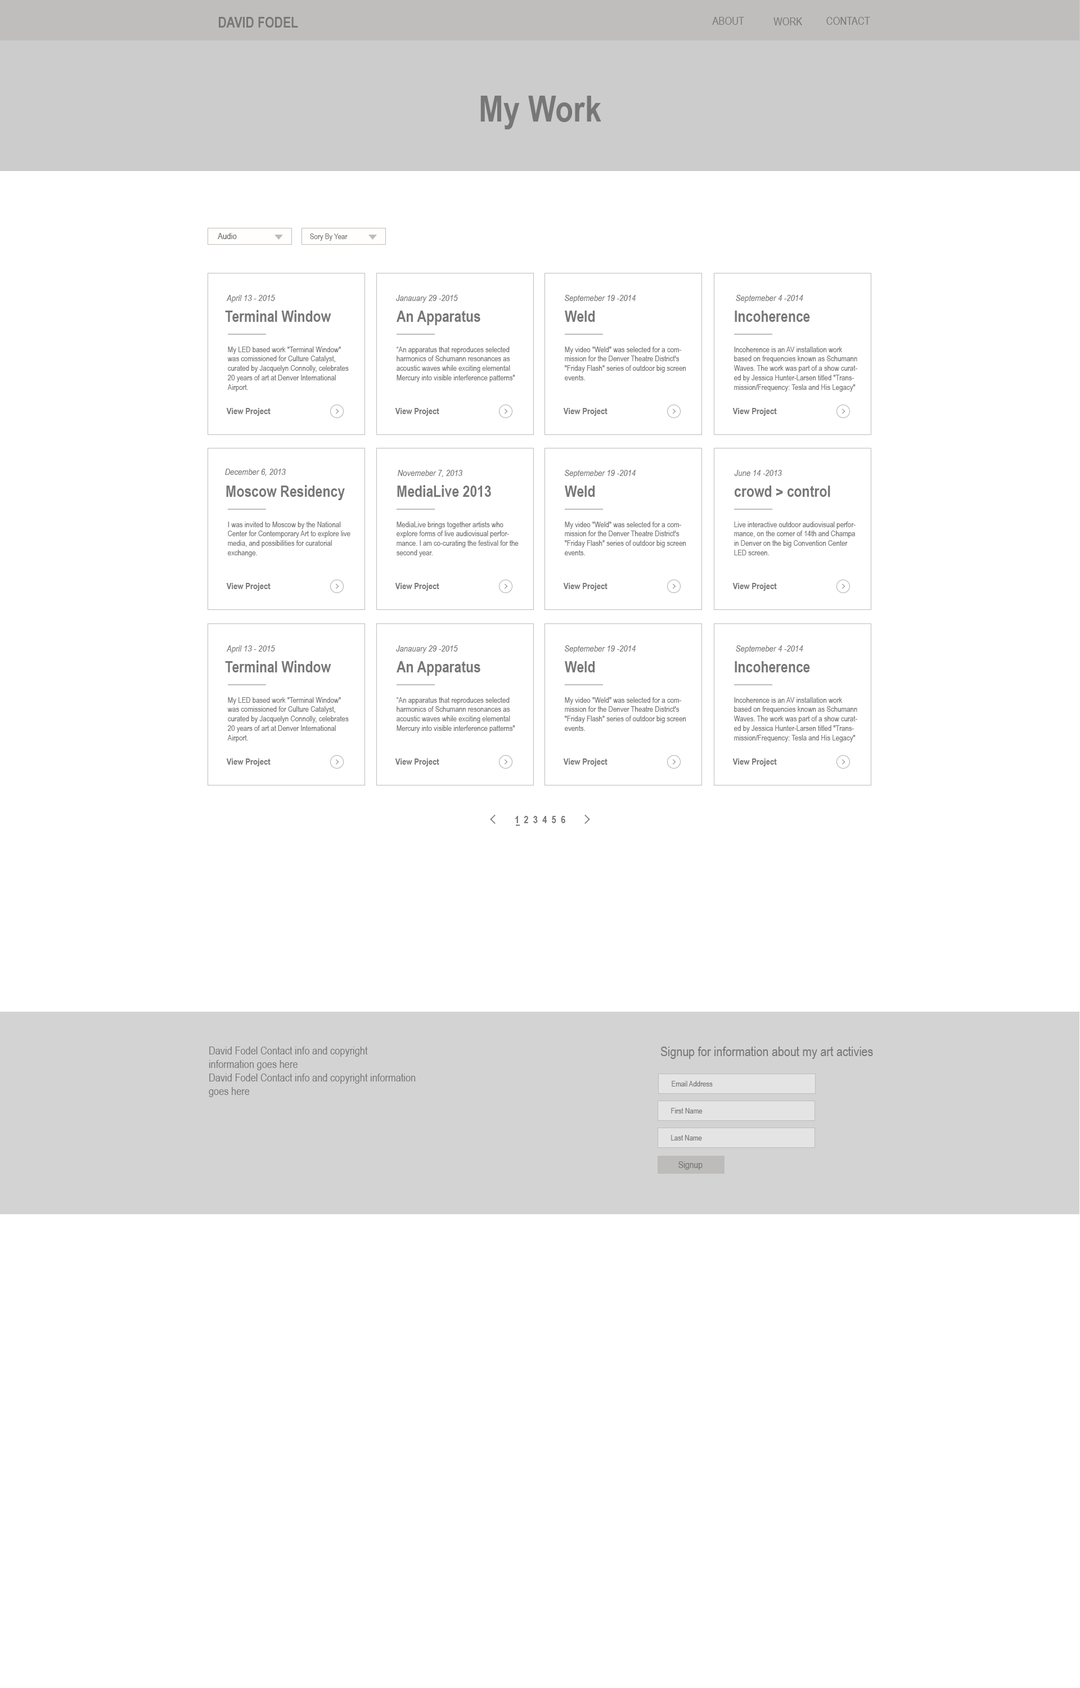
<style>
.page{position:relative;width:1080px;height:1688px;background:#ffffff}
.page>*{position:absolute;margin:0}
.t1{font:14.6px "ArialNarrow-Bold";color:#777777}
.t2{font:11.2px "ArialNarrow";color:#777777}
.t3{font:36px "ArialNarrow-Bold";color:#777777}
.t4{font:9px "ArialNarrow";color:#777777}
.t5{font:7.9px "ArialNarrow";color:#777777}
.t6{font:9px "ArialNarrow-Italic";color:#777777}
.t7{font:15.8px "ArialNarrow-Bold";color:#777777}
.t8{font:9px "ArialNarrow-Bold";color:#777777}
.t9{font:10.1px "ArialNarrow-Bold";color:#777777}
.t10{font:13.5px "ArialNarrow";color:#777777}
.t11{font:9.6px "ArialNarrow";color:#777777}
</style>
<div class="page">
<p class="t1" style="left:219px;top:17px;width:79px;height:11px">DAVID FODEL</p>
<p class="t2" style="left:712px;top:17px;width:32px;height:8px">ABOUT</p>
<p class="t2" style="left:773px;top:17px;width:29px;height:8px">WORK</p>
<p class="t2" style="left:826px;top:17px;width:44px;height:8px">CONTACT</p>
<p class="t3" style="left:480px;top:96px;width:121px;height:33px">My Work</p>
<p class="t4" style="left:218px;top:233px;width:19px;height:6px">Audio</p>
<p class="t5" style="left:310px;top:233px;width:38px;height:8px">Sory By Year</p>
<p class="t6" style="left:226px;top:295px;width:49px;height:8px">April 13 - 2015</p>
<p class="t6" style="left:396px;top:295px;width:62px;height:8px">Janauary 29 -2015</p>
<p class="t6" style="left:565px;top:295px;width:71px;height:8px">Septemeber 19 -2014</p>
<p class="t6" style="left:736px;top:295px;width:67px;height:8px">Septemeber 4 -2014</p>
<p class="t7" style="left:225px;top:310px;width:106px;height:12px">Terminal Window</p>
<p class="t7" style="left:397px;top:310px;width:83px;height:15px">An Apparatus</p>
<p class="t7" style="left:565px;top:310px;width:30px;height:12px">Weld</p>
<p class="t7" style="left:735px;top:310px;width:75px;height:12px">Incoherence</p>
<p class="t5" style="left:227px;top:346px;width:122px;height:46px">My LED based work "Terminal Window" was comissioned for Culture Catalyst, curated by Jacquelyn Connolly, celebrates 20 years of art at Denver International Airport.</p>
<p class="t5" style="left:397px;top:346px;width:118px;height:36px">“An apparatus that reproduces selected harmonics of Schumann resonances as acoustic waves while exciting elemental Mercury into visible interference patterns"</p>
<p class="t5" style="left:565px;top:346px;width:121px;height:34px">My video "Weld" was selected for a commission for the Denver Theatre District's "Friday Flash" series of outdoor big screen events.</p>
<p class="t5" style="left:734px;top:346px;width:124px;height:46px">Incoherence is an AV installation work based on frequencies known as Schumann Waves. The work was part of a show curated by Jessica Hunter-Larsen titled "Transmission/Frequency: Tesla and His Legacy"</p>
<p class="t8" style="left:226px;top:408px;width:45px;height:8px">View Project</p>
<p class="t8" style="left:395px;top:408px;width:44px;height:8px">View Project</p>
<p class="t8" style="left:563px;top:408px;width:45px;height:8px">View Project</p>
<p class="t8" style="left:732px;top:408px;width:45px;height:8px">View Project</p>
<p class="t6" style="left:225px;top:469px;width:61px;height:7px">December 6, 2013</p>
<p class="t6" style="left:398px;top:470px;width:64px;height:7px">Novemeber 7, 2013</p>
<p class="t6" style="left:565px;top:470px;width:71px;height:8px">Septemeber 19 -2014</p>
<p class="t6" style="left:734px;top:470px;width:48px;height:6px">June 14 -2013</p>
<p class="t7" style="left:226px;top:485px;width:119px;height:15px">Moscow Residency</p>
<p class="t7" style="left:397px;top:485px;width:94px;height:12px">MediaLive 2013</p>
<p class="t7" style="left:565px;top:485px;width:30px;height:12px">Weld</p>
<p class="t7" style="left:735px;top:485px;width:95px;height:12px">crowd &gt; control</p>
<p class="t5" style="left:228px;top:521px;width:122px;height:36px">I was invited to Moscow by the National Center for Contemporary Art to explore live media, and possibilities for curatorial exchange.</p>
<p class="t5" style="left:397px;top:521px;width:122px;height:36px">MediaLive brings together artists who explore forms of live audiovisual performance. I am co-curating the festival for the second year.</p>
<p class="t5" style="left:565px;top:521px;width:121px;height:34px">My video "Weld" was selected for a commission for the Denver Theatre District's "Friday Flash" series of outdoor big screen events.</p>
<p class="t5" style="left:734px;top:521px;width:122px;height:34px">Live interactive outdoor audiovisual performance, on the corner of 14th and Champa in Denver on the big Convention Center LED screen.</p>
<p class="t8" style="left:226px;top:583px;width:45px;height:8px">View Project</p>
<p class="t8" style="left:395px;top:583px;width:44px;height:8px">View Project</p>
<p class="t8" style="left:563px;top:583px;width:45px;height:8px">View Project</p>
<p class="t8" style="left:732px;top:583px;width:45px;height:8px">View Project</p>
<p class="t6" style="left:226px;top:645px;width:49px;height:8px">April 13 - 2015</p>
<p class="t6" style="left:396px;top:645px;width:62px;height:8px">Janauary 29 -2015</p>
<p class="t6" style="left:565px;top:645px;width:71px;height:8px">Septemeber 19 -2014</p>
<p class="t6" style="left:736px;top:645px;width:67px;height:8px">Septemeber 4 -2014</p>
<p class="t7" style="left:225px;top:660px;width:106px;height:12px">Terminal Window</p>
<p class="t7" style="left:397px;top:661px;width:83px;height:15px">An Apparatus</p>
<p class="t7" style="left:565px;top:661px;width:30px;height:11px">Weld</p>
<p class="t7" style="left:735px;top:661px;width:75px;height:11px">Incoherence</p>
<p class="t5" style="left:227px;top:697px;width:122px;height:45px">My LED based work "Terminal Window" was comissioned for Culture Catalyst, curated by Jacquelyn Connolly, celebrates 20 years of art at Denver International Airport.</p>
<p class="t5" style="left:397px;top:697px;width:118px;height:35px">“An apparatus that reproduces selected harmonics of Schumann resonances as acoustic waves while exciting elemental Mercury into visible interference patterns"</p>
<p class="t5" style="left:565px;top:697px;width:121px;height:34px">My video "Weld" was selected for a commission for the Denver Theatre District's "Friday Flash" series of outdoor big screen events.</p>
<p class="t5" style="left:734px;top:697px;width:124px;height:45px">Incoherence is an AV installation work based on frequencies known as Schumann Waves. The work was part of a show curated by Jessica Hunter-Larsen titled "Transmission/Frequency: Tesla and His Legacy"</p>
<p class="t8" style="left:226px;top:758px;width:45px;height:8px">View Project</p>
<p class="t8" style="left:395px;top:758px;width:44px;height:8px">View Project</p>
<p class="t8" style="left:563px;top:758px;width:45px;height:8px">View Project</p>
<p class="t8" style="left:732px;top:758px;width:45px;height:8px">View Project</p>
<p class="t9" style="left:515px;top:816px;width:50px;height:7px">1  2  3  4  5  6</p>
<p class="t2" style="left:209px;top:1046px;width:207px;height:51px">David Fodel Contact info and copyright <br>information goes here<br>David Fodel Contact info and copyright information <br>goes here</p>
<p class="t10" style="left:660px;top:1046px;width:213px;height:13px">Signup for information about my art activies</p>
<p class="t5" style="left:672px;top:1081px;width:41px;height:5px">Email Address</p>
<p class="t5" style="left:671px;top:1108px;width:32px;height:5px">First Name</p>
<p class="t5" style="left:671px;top:1135px;width:31px;height:5px">Last Name</p>
<p class="t11" style="left:678px;top:1161px;width:25px;height:8px">Signup</p>
</div>
